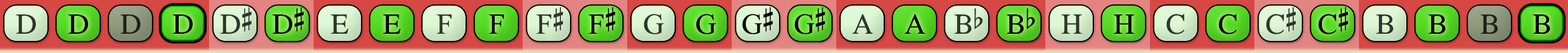
<style>
.page{position:relative;width:1568px;height:53px}
.page>*{position:absolute;margin:0}
.t1{font:29.2px "OpusChords";color:#2f352d}
.t2{font:29.2px "OpusChords";color:#000000}
.t3{font:29.2px "OpusChords";color:#1e211b}
.t4{font:29.2px "OpusChords";letter-spacing:-0.025em;color:#2f352d}
.t5{font:29.2px "OpusChords";letter-spacing:-0.025em;color:#000000}
.t6{font:29.2px "OpusChords";color:#30362e}
.t7{font:29.2px "OpusChords";color:#30352d}
.t8{font:29.2px "OpusChords";color:#1f211b}
</style>
<div class="page">
<p class="t1" style="left:16px;top:15px;width:20px;height:19px">D</p>
<p class="t2" style="left:68px;top:15px;width:20px;height:19px">D</p>
<p class="t3" style="left:120px;top:15px;width:20px;height:19px">D</p>
<p class="t2" style="left:173px;top:15px;width:20px;height:19px">D</p>
<p class="t4" style="left:220px;top:7px;width:32px;height:27px">D#</p>
<p class="t5" style="left:272px;top:7px;width:32px;height:27px">D#</p>
<p class="t6" style="left:331px;top:15px;width:17px;height:19px">E</p>
<p class="t2" style="left:383px;top:15px;width:18px;height:19px">E</p>
<p class="t6" style="left:436px;top:15px;width:16px;height:19px">F</p>
<p class="t2" style="left:489px;top:15px;width:15px;height:19px">F</p>
<p class="t7" style="left:536px;top:7px;width:27px;height:27px">F#</p>
<p class="t2" style="left:588px;top:7px;width:28px;height:27px">F#</p>
<p class="t1" style="left:644px;top:14px;width:20px;height:21px">G</p>
<p class="t2" style="left:696px;top:14px;width:20px;height:21px">G</p>
<p class="t5" style="left:742px;top:7px;width:31px;height:28px">G#</p>
<p class="t5" style="left:794px;top:7px;width:31px;height:28px">G#</p>
<p class="t1" style="left:852px;top:14px;width:21px;height:20px">A</p>
<p class="t2" style="left:904px;top:14px;width:21px;height:20px">A</p>
<p class="t7" style="left:954px;top:9px;width:29px;height:25px">Bb</p>
<p class="t2" style="left:1006px;top:9px;width:29px;height:25px">Bb</p>
<p class="t7" style="left:1061px;top:15px;width:21px;height:19px">H</p>
<p class="t2" style="left:1113px;top:15px;width:21px;height:19px">H</p>
<p class="t6" style="left:1166px;top:14px;width:19px;height:21px">C</p>
<p class="t2" style="left:1219px;top:14px;width:18px;height:21px">C</p>
<p class="t1" style="left:1266px;top:7px;width:30px;height:28px">C#</p>
<p class="t2" style="left:1318px;top:7px;width:30px;height:28px">C#</p>
<p class="t7" style="left:1376px;top:15px;width:18px;height:19px">B</p>
<p class="t2" style="left:1428px;top:15px;width:18px;height:19px">B</p>
<p class="t8" style="left:1480px;top:15px;width:18px;height:19px">B</p>
<p class="t2" style="left:1533px;top:15px;width:17px;height:19px">B</p>
</div>
